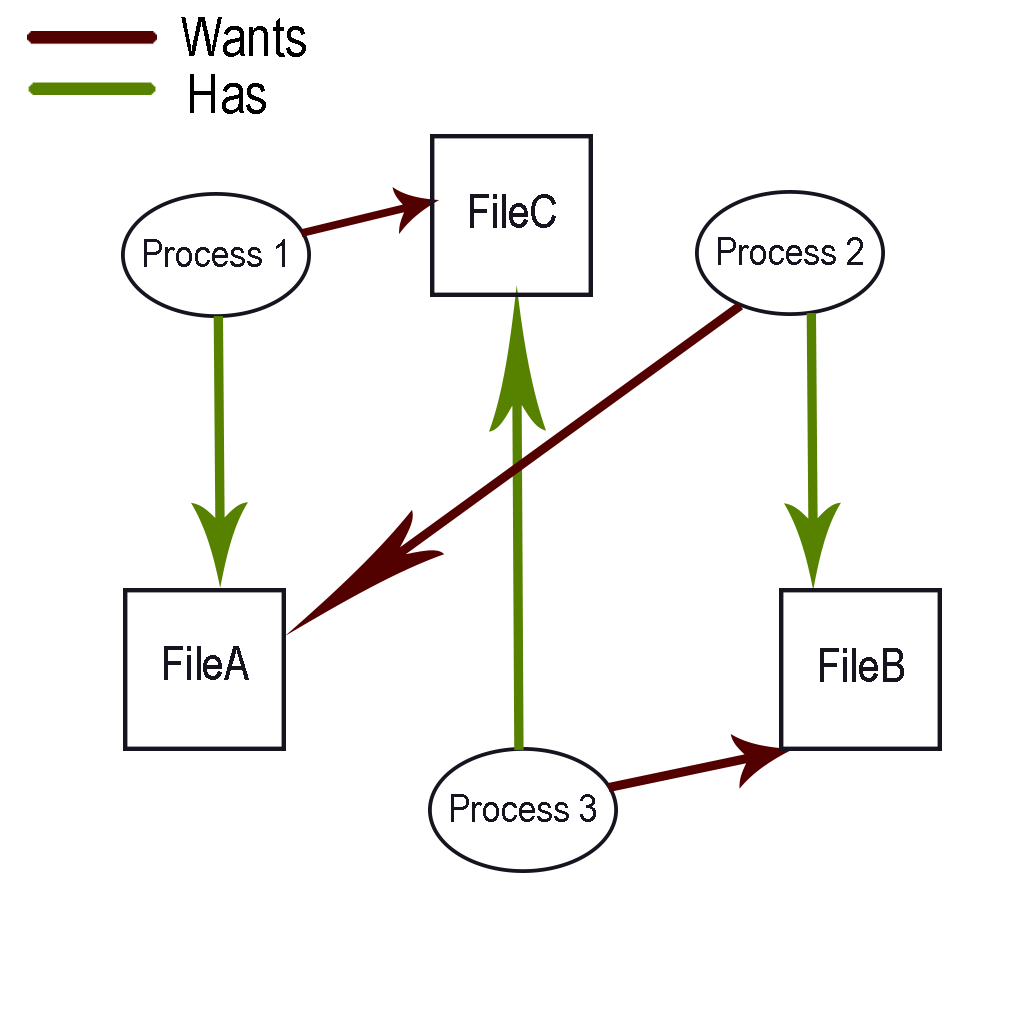
<style>
.page{position:relative;width:1024px;height:1024px;background:#ffffff}
.page>*{position:absolute;margin:0}
.t1{font:55.5px "ArialNarrow";color:#000000}
.t2{font:48px "ArialNarrow";color:#17141f}
.t3{font:38.8px "ArialNarrow";color:#17141f;scale:1.06 1}
</style>
<div class="page">
<p class="t1" style="left:181px;top:17px;width:125px;height:40px">Wants</p>
<p class="t1" style="left:190px;top:74px;width:76px;height:40px">Has</p>
<p class="t2" style="left:470px;top:194px;width:86px;height:34px">FileC</p>
<p class="t3" style="left:144px;top:239px;width:141px;height:28px">Process 1</p>
<p class="t3" style="left:718px;top:237px;width:145px;height:28px">Process 2</p>
<p class="t2" style="left:164px;top:646px;width:85px;height:34px">FileA</p>
<p class="t2" style="left:820px;top:648px;width:84px;height:34px">FileB</p>
<p class="t3" style="left:451px;top:794px;width:145px;height:28px">Process 3</p>
</div>
